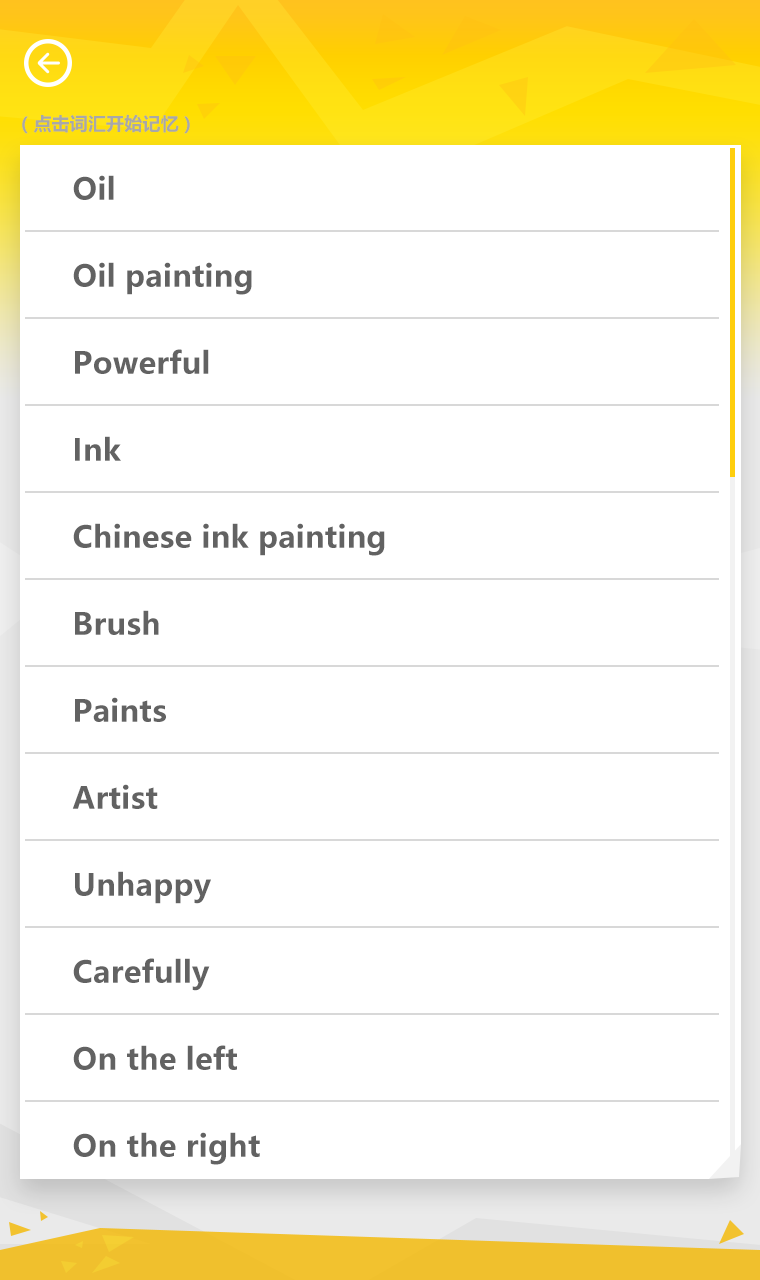
<style>
.page{position:relative;width:760px;height:1280px;background:#ffffff}
.page>*{position:absolute;margin:0}
.t1{font:18px "MicrosoftYaHei-Bold";letter-spacing:0.01em;color:#a8a8a8}
.t2{font:30px "MicrosoftYaHei-Bold";letter-spacing:0.01em;color:#626262}
</style>
<div class="page">
<p class="t1" style="left:22px;top:114px;width:168px;height:20px">（点击词汇开始记忆）</p>
<p class="t2" style="left:73px;top:175px;width:41px;height:25px">Oil</p>
<p class="t2" style="left:73px;top:262px;width:179px;height:33px">Oil painting</p>
<p class="t2" style="left:75px;top:349px;width:134px;height:25px">Powerful</p>
<p class="t2" style="left:75px;top:436px;width:46px;height:25px">Ink</p>
<p class="t2" style="left:73px;top:523px;width:312px;height:33px">Chinese ink painting</p>
<p class="t2" style="left:75px;top:610px;width:84px;height:25px">Brush</p>
<p class="t2" style="left:75px;top:697px;width:91px;height:25px">Paints</p>
<p class="t2" style="left:72px;top:784px;width:86px;height:25px">Artist</p>
<p class="t2" style="left:75px;top:871px;width:136px;height:33px">Unhappy</p>
<p class="t2" style="left:73px;top:958px;width:137px;height:33px">Carefully</p>
<p class="t2" style="left:73px;top:1045px;width:164px;height:25px">On the left</p>
<p class="t2" style="left:73px;top:1132px;width:187px;height:33px">On the right</p>
</div>
